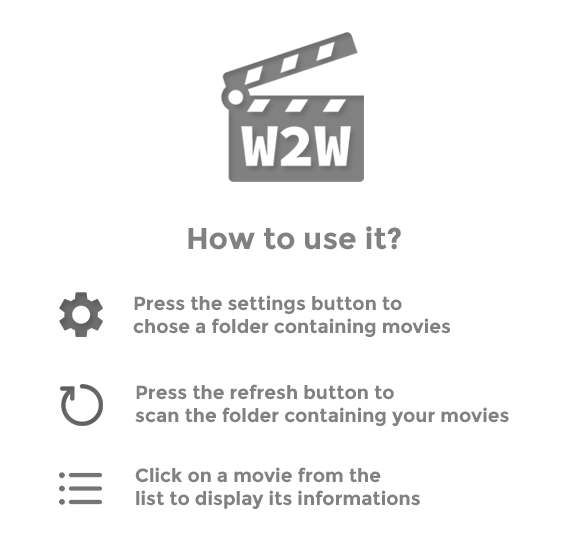
<style>
.page{position:relative;width:585px;height:540px;background:#ffffff}
.page>*{position:absolute;margin:0}
.t1{font:30px "Montserrat-Bold";color:#818181}
.t2{font:19px "Montserrat-Bold";color:#818181}
</style>
<div class="page">
<p class="t1" style="left:188px;top:226px;width:213px;height:24px">How to use it?</p>
<p class="t2" style="left:133px;top:295px;width:317px;height:42px">Press the settings button to <br>chose a folder containing movies</p>
<p class="t2" style="left:135px;top:384px;width:374px;height:42px">Press the refresh button to<br>scan the folder containing your movies</p>
<p class="t2" style="left:135px;top:467px;width:285px;height:42px">Click on a movie from the <br>list to display its informations</p>
</div>
